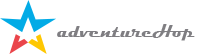
<style>
.page{position:relative;width:203px;height:54px;background:#ffffff}
.page>*{position:absolute;margin:0}
.t1{font:18px "Magneto-Bold";color:#7f7e82}
</style>
<div class="page">
<p class="t1" style="left:57px;top:24px;width:138px;height:17px">adventureHop</p>
</div>
